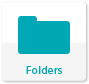
<style>
.page{position:relative;width:89px;height:84px;background:#ffffff}
.page>*{position:absolute;margin:0}
.t1{font:11px "MyriadPro-Regular";letter-spacing:0.04em;color:#00a8b5}
</style>
<div class="page">
<p class="t1" style="left:26px;top:66px;width:36px;height:8px">Folders</p>
</div>
